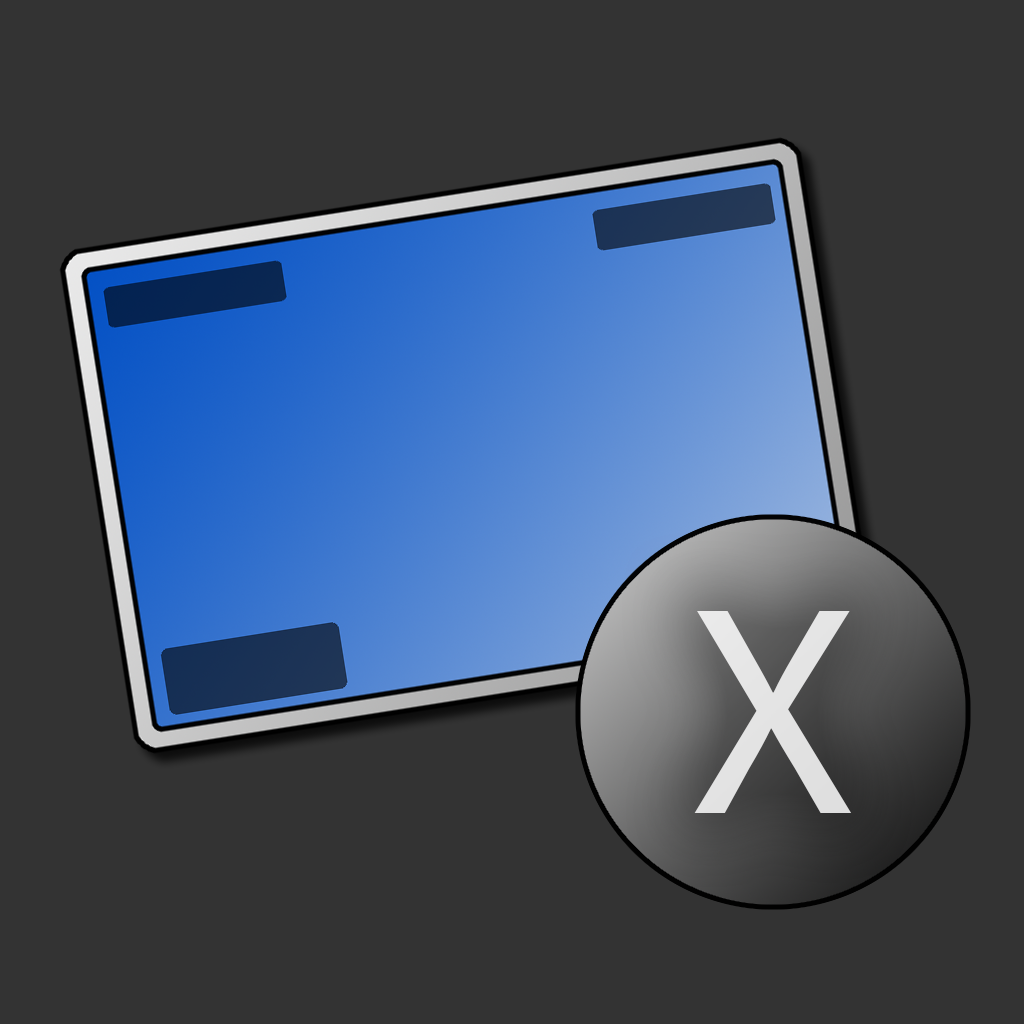
<style>
.page{position:relative;width:1024px;height:1024px;background:#333333}
.page>*{position:absolute;margin:0}
.t1{font:300px "MyriadPro-Regular";color:#e4e4e4}
</style>
<div class="page">
<p class="t1" style="left:694px;top:611px;width:157px;height:202px">X</p>
</div>
